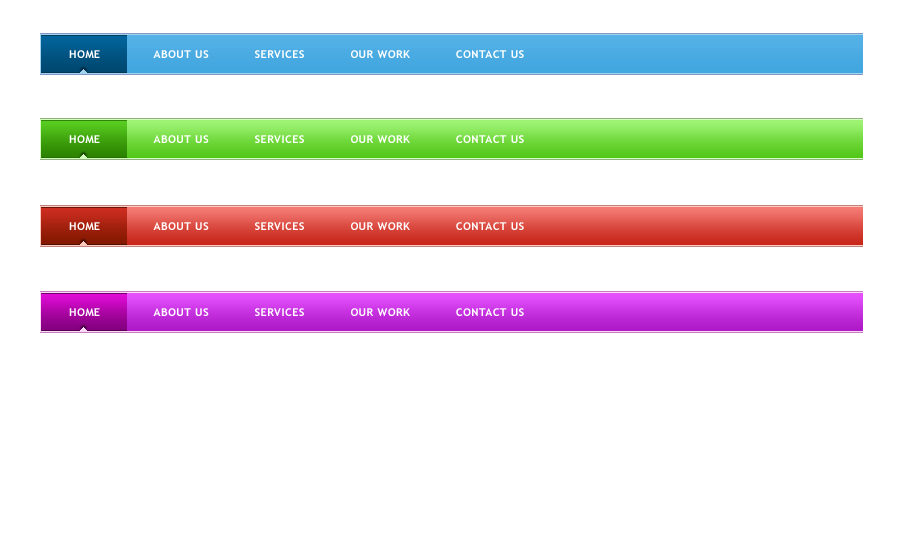
<style>
.page{position:relative;width:900px;height:550px;background:#ffffff}
.page>*{position:absolute;margin:0}
.t1{font:11px "TrebuchetMS-Bold";letter-spacing:0.043em;color:#ffffff}
</style>
<div class="page">
<p class="t1" style="left:69px;top:50px;width:455px;height:8px">HOME              ABOUT US            SERVICES            OUR WORK            CONTACT US</p>
<p class="t1" style="left:69px;top:135px;width:455px;height:8px">HOME              ABOUT US            SERVICES            OUR WORK            CONTACT US</p>
<p class="t1" style="left:69px;top:222px;width:455px;height:8px">HOME              ABOUT US            SERVICES            OUR WORK            CONTACT US</p>
<p class="t1" style="left:69px;top:308px;width:455px;height:8px">HOME              ABOUT US            SERVICES            OUR WORK            CONTACT US</p>
</div>
